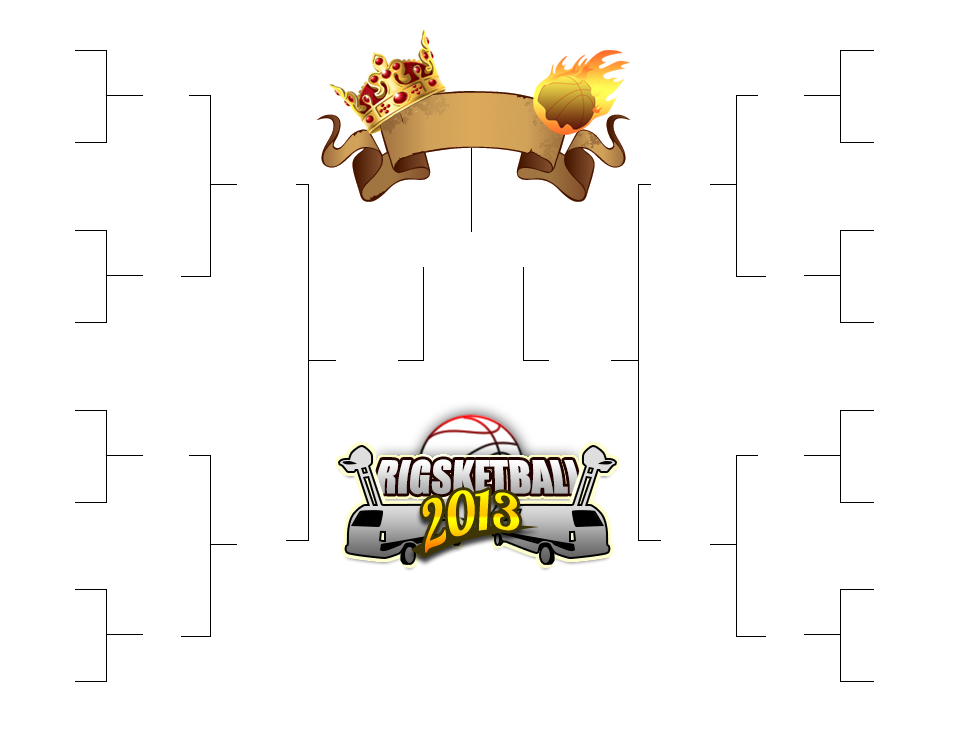
<style>
.page{position:relative;width:962px;height:740px;background:#ffffff}
.page>*{position:absolute;margin:0}
.t1{font:41.6px "Impact";scale:0.93 1}
</style>
<div class="page">
<p class="t1" style="left:376px;top:459px;width:208px;height:36px">RIGSKETBALL</p>
</div>
